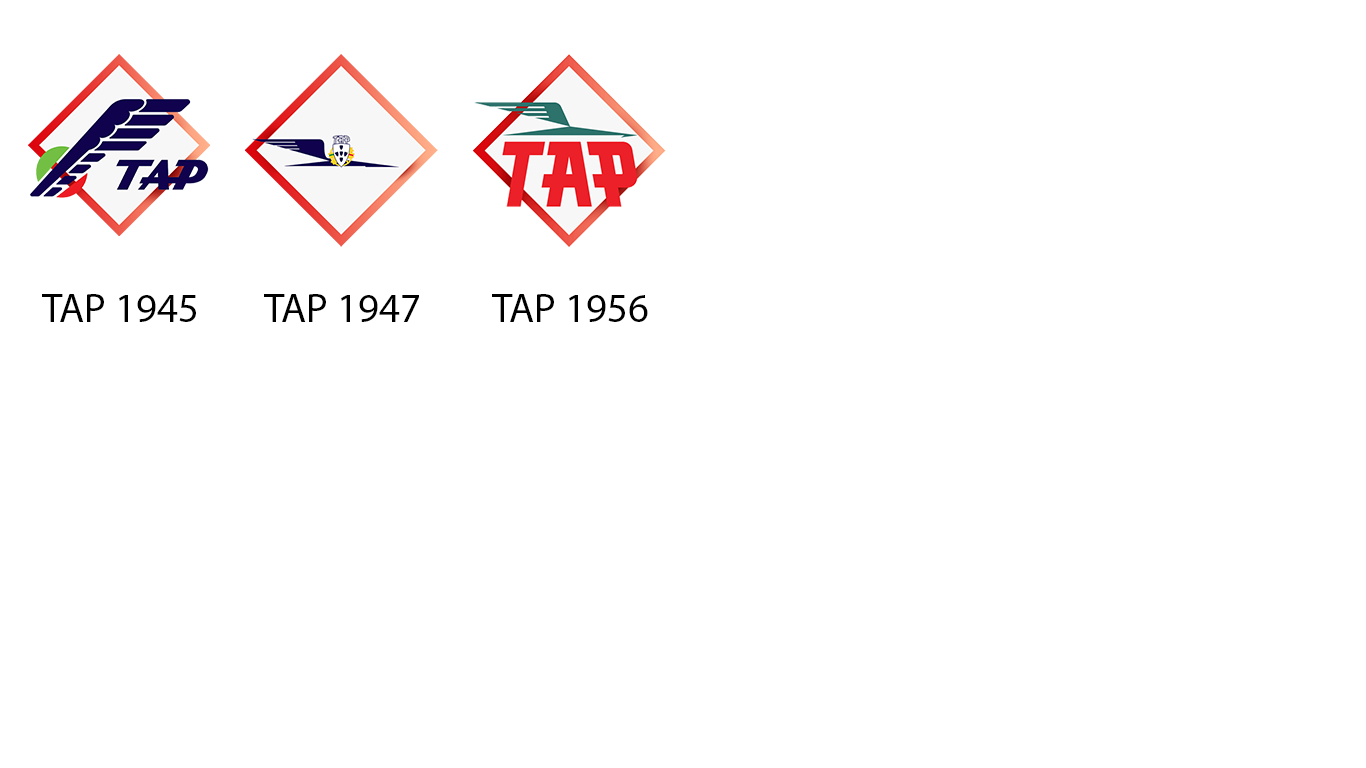
<style>
.page{position:relative;width:1366px;height:768px;background:#ffffff}
.page>*{position:absolute;margin:0}
.t1{font:41.1px "MyriadPro-Regular";color:#000000}
</style>
<div class="page">
<p class="t1" style="left:42px;top:294px;width:154px;height:28px">TAP 1945</p>
<p class="t1" style="left:264px;top:294px;width:155px;height:28px">TAP 1947</p>
<p class="t1" style="left:492px;top:294px;width:156px;height:28px">TAP 1956</p>
</div>
